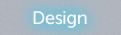
<style>
.page{position:relative;width:121px;height:35px}
.page>*{position:absolute;margin:0}
.t1{font:18px "MuseoSans-500";letter-spacing:-0.02em;color:#fbfbfb}
</style>
<div class="page">
<p class="t1" style="left:33px;top:11px;width:54px;height:17px">Design</p>
</div>
